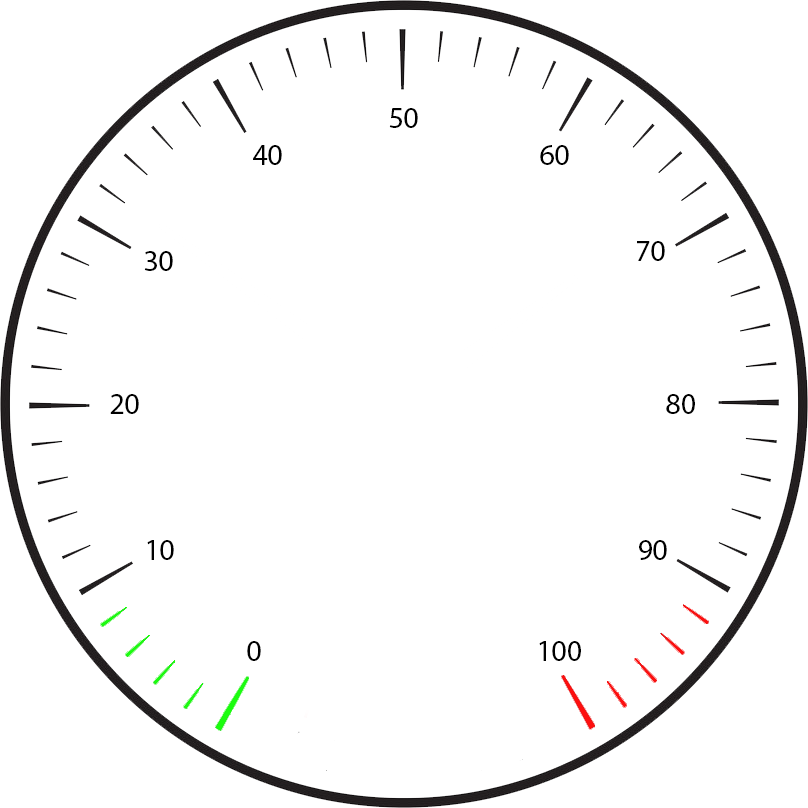
<style>
.page{position:relative;width:808px;height:808px;background:#ffffff}
.page>*{position:absolute;margin:0}
.t1{font:30px "MyriadPro-Regular";color:#000000}
</style>
<div class="page">
<p class="t1" style="left:389px;top:108px;width:29px;height:20px">50</p>
<p class="t1" style="left:253px;top:145px;width:29px;height:20px">40</p>
<p class="t1" style="left:540px;top:145px;width:29px;height:20px">60</p>
<p class="t1" style="left:637px;top:241px;width:28px;height:20px">70</p>
<p class="t1" style="left:144px;top:251px;width:29px;height:20px">30</p>
<p class="t1" style="left:110px;top:394px;width:29px;height:20px">20</p>
<p class="t1" style="left:666px;top:394px;width:29px;height:20px">80</p>
<p class="t1" style="left:147px;top:540px;width:27px;height:20px">10</p>
<p class="t1" style="left:639px;top:540px;width:28px;height:20px">90</p>
<p class="t1" style="left:247px;top:641px;width:14px;height:20px">0</p>
<p class="t1" style="left:539px;top:641px;width:42px;height:20px">100</p>
</div>
